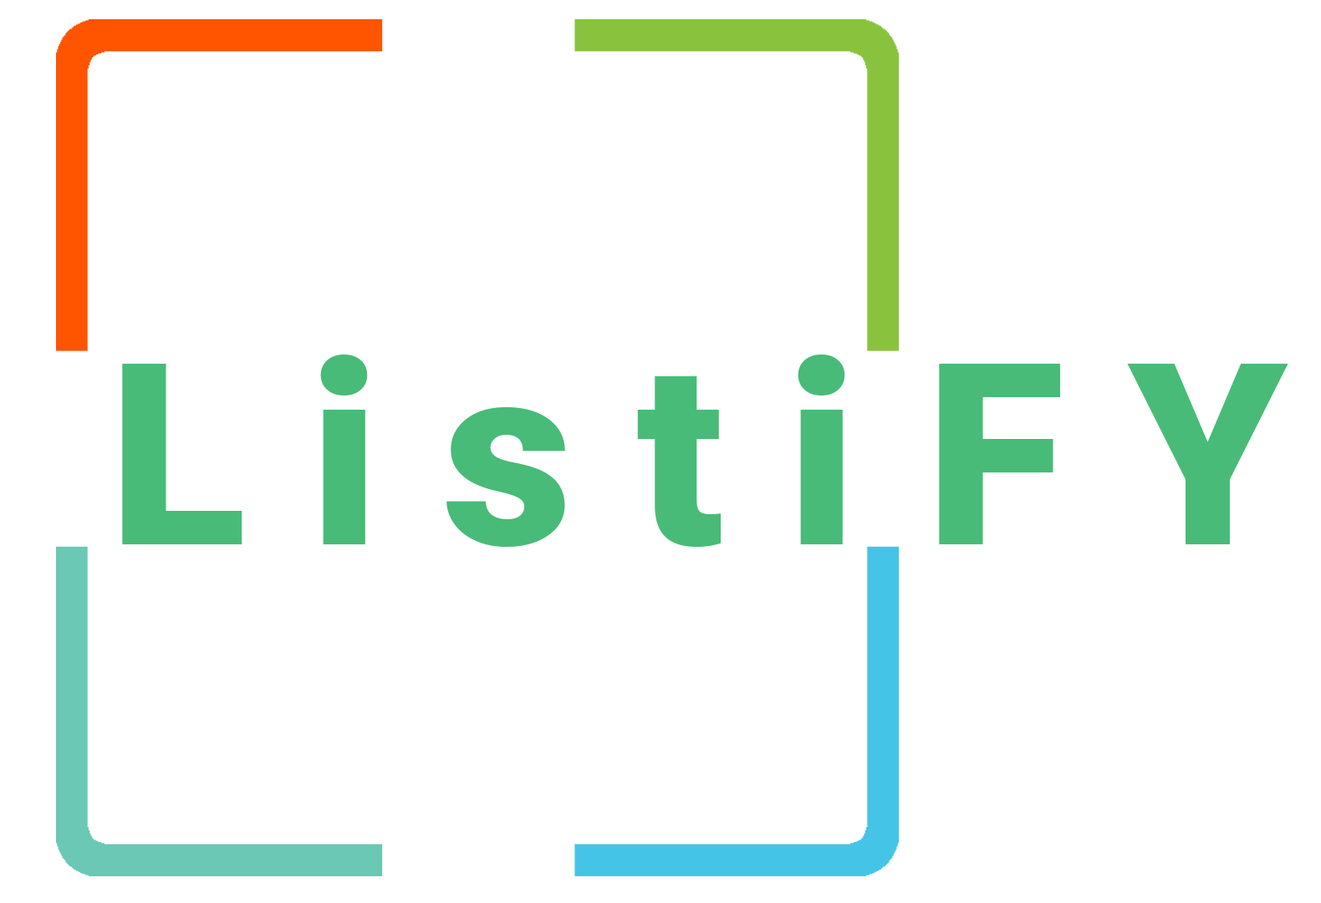
<style>
.page{position:relative;width:1321px;height:903px;background:#ffffff}
.page>*{position:absolute;margin:0}
.t1{font:254.1px "Roboto-Black";color:#48bb78}
</style>
<div class="page">
<p class="t1" style="left:122px;top:354px;width:723px;height:193px">L i s t i</p>
<p class="t1" style="left:939px;top:364px;width:349px;height:180px">F Y</p>
</div>
